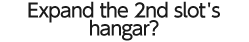
<style>
.page{position:relative;width:249px;height:42px;background:#ffffff}
.page>*{position:absolute;margin:0}
.t1{font:19px/18px "UDShinGoPro-Medium";letter-spacing:-0.04em;color:#1b1b1b}
</style>
<div class="page">
<p class="t1" style="left:28px;top:1px;width:192px;height:40px;text-align:center">Expand the 2nd slot's<br>hangar?</p>
</div>
